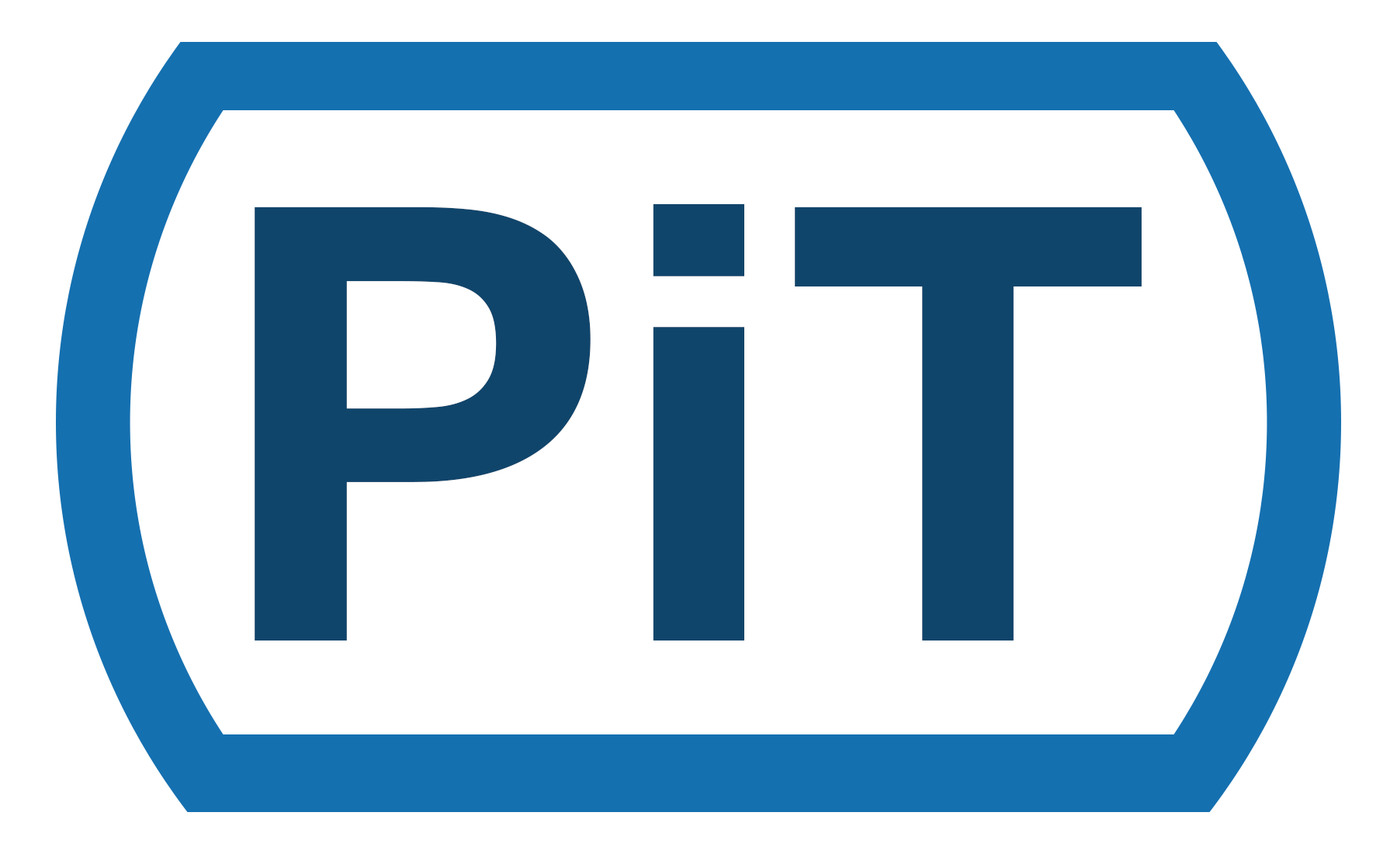
<style>
.page{position:relative;width:1397px;height:854px;background:#ffffff}
.page>*{position:absolute;margin:0}
.t1{font:776px "Tunga-Bold";color:#10456b}
</style>
<div class="page">
<p class="t1" style="left:255px;top:203px;width:887px;height:437px">PiT</p>
</div>
